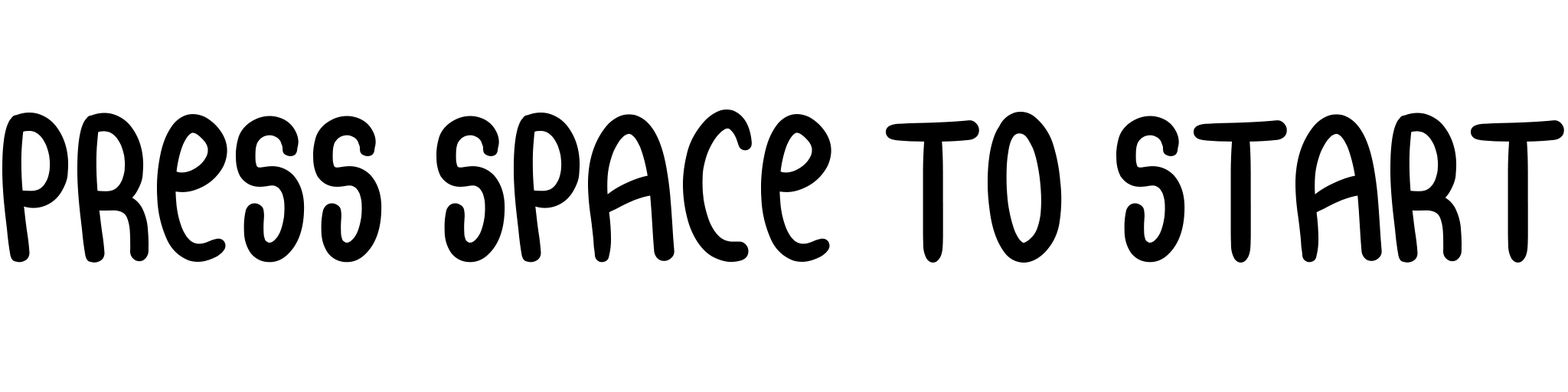
<style>
.page{position:relative;width:1568px;height:392px;background:#ffffff}
.page>*{position:absolute;margin:0}
.t1{font:184.8px "samble";color:#000000}
</style>
<div class="page">
<p class="t1" style="left:2px;top:109px;width:1562px;height:154px">PRESS SPACE TO START</p>
</div>
